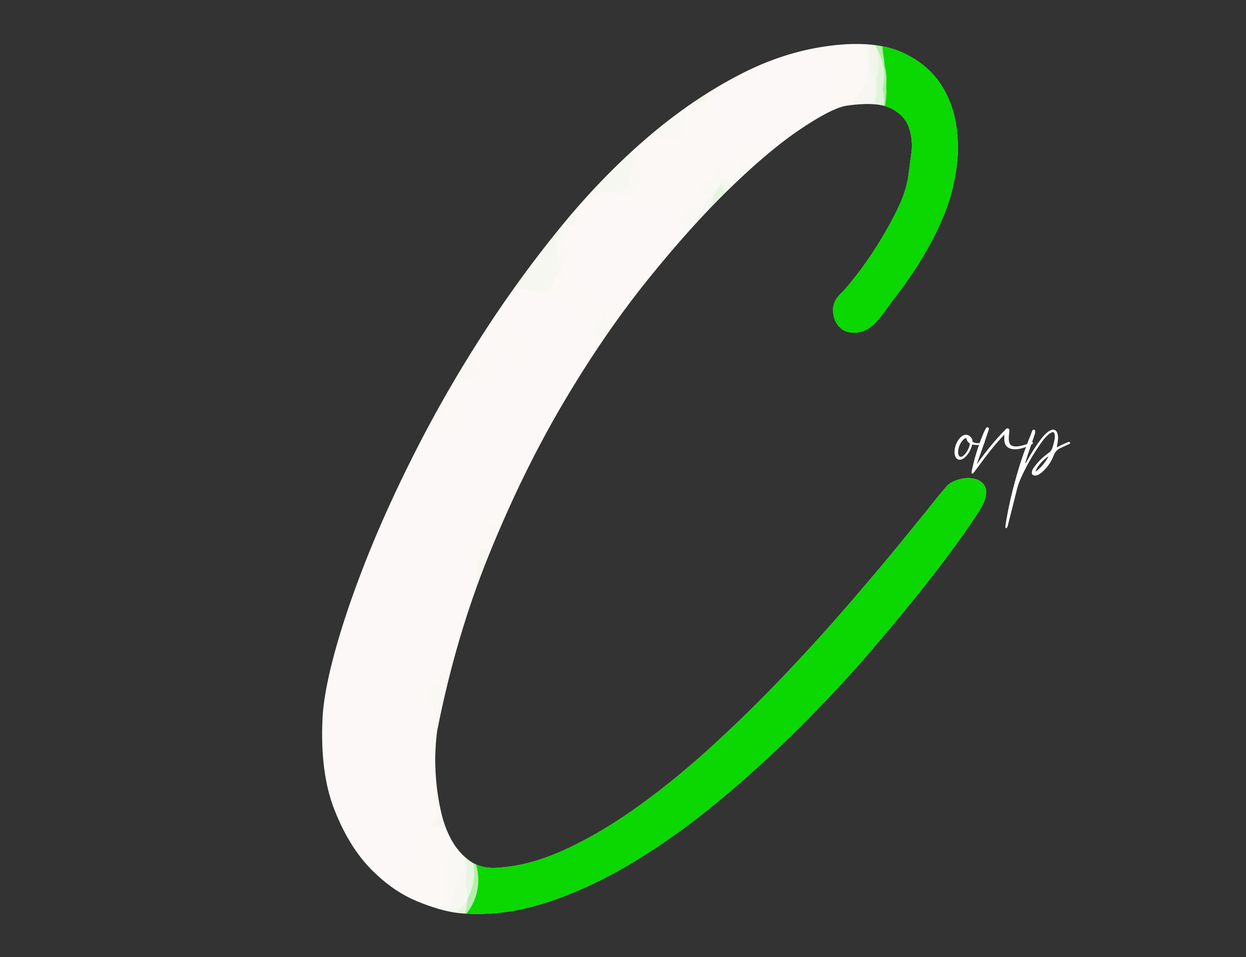
<style>
.page{position:relative;width:1246px;height:957px;background:#333333}
.page>*{position:absolute;margin:0}
.t1{font:130.8px "HathemBosteemFREE";letter-spacing:-0.025em;color:#ffffff}
</style>
<div class="page">
<p class="t1" style="left:955px;top:427px;width:116px;height:101px">orp</p>
</div>
